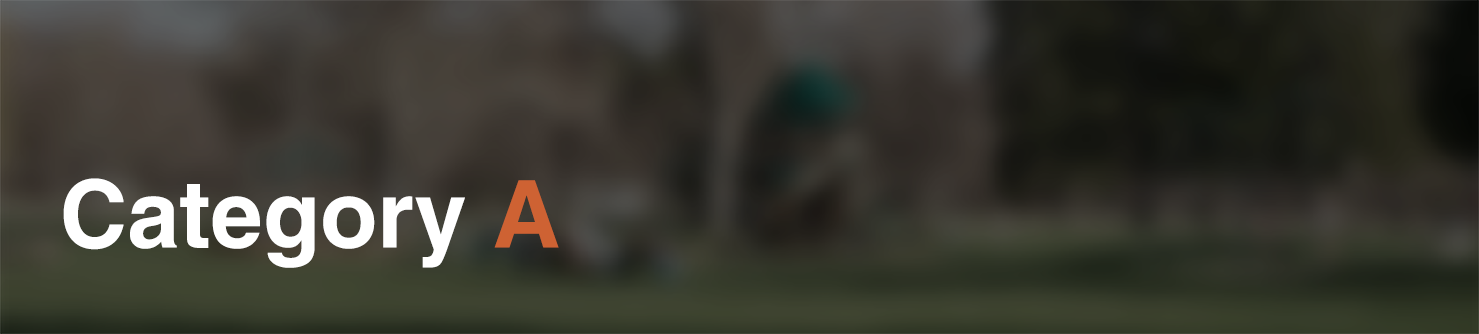
<style>
.page{position:relative;width:1479px;height:334px}
.page>*{position:absolute;margin:0}
.t1{font:93.6px "HelveticaLTPro-Bold";color:#ffffff}
.t2{font:93.6px "HelveticaLTPro-Bold";color:#ce6233}
</style>
<div class="page">
<p class="t1" style="left:63px;top:178px;width:496px;height:90px">Category <span class="t2">A</span></p>
</div>
